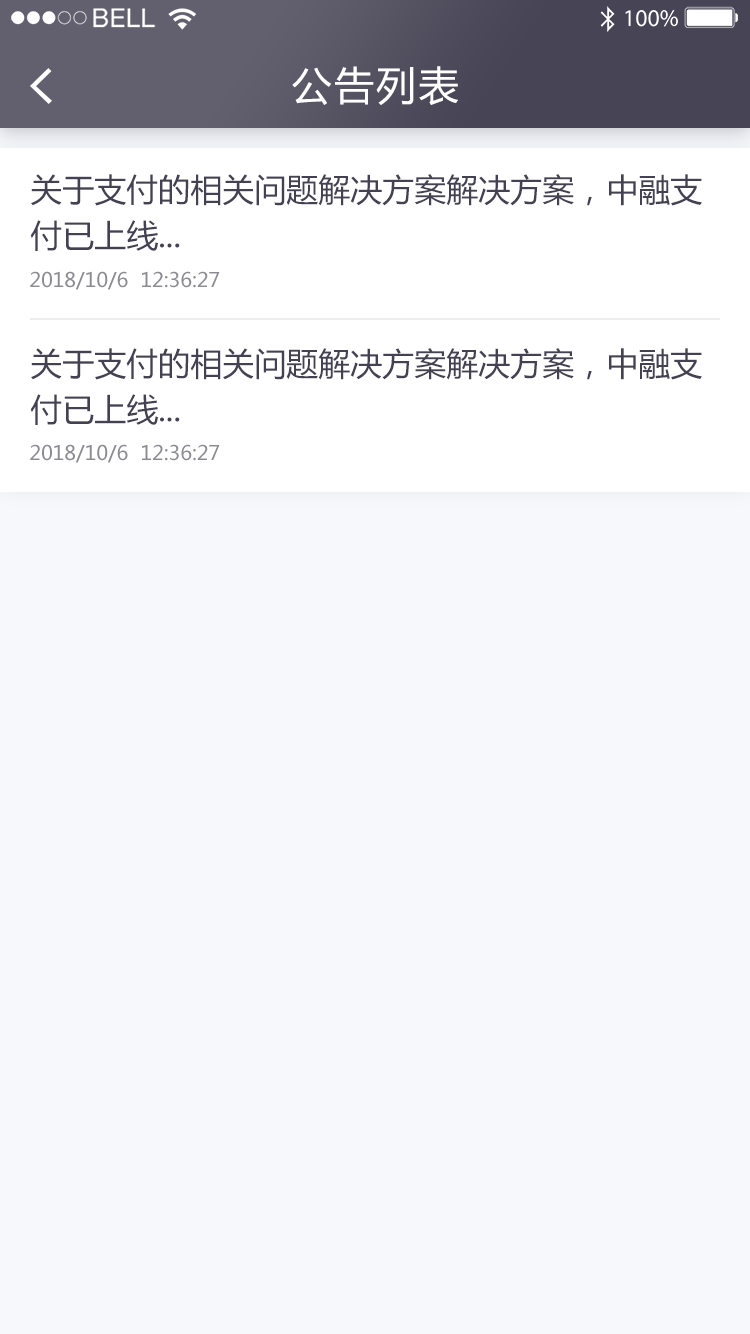
<style>
.page{position:relative;width:750px;height:1334px;background:#f7f8fc}
.page>*{position:absolute;margin:0}
.t1{font:40px "MicrosoftYaHei";letter-spacing:0.06em;color:#ffffff}
.t2{font:32px/46px "MicrosoftYaHei";color:#444152}
.t3{font:20px "MicrosoftYaHei";color:#8b8b92}
</style>
<div class="page">
<p class="t1" style="left:292px;top:66px;width:166px;height:39px">公告列表</p>
<p class="t2" style="left:30px;top:174px;width:672px;height:77px">关于支付的相关问题解决方案解决方案，中融支<br>付已上线...</p>
<p class="t3" style="left:30px;top:271px;width:190px;height:19px">2018/10/6  12:36:27</p>
<p class="t2" style="left:30px;top:348px;width:672px;height:77px">关于支付的相关问题解决方案解决方案，中融支<br>付已上线...</p>
<p class="t3" style="left:30px;top:444px;width:190px;height:19px">2018/10/6  12:36:27</p>
</div>
